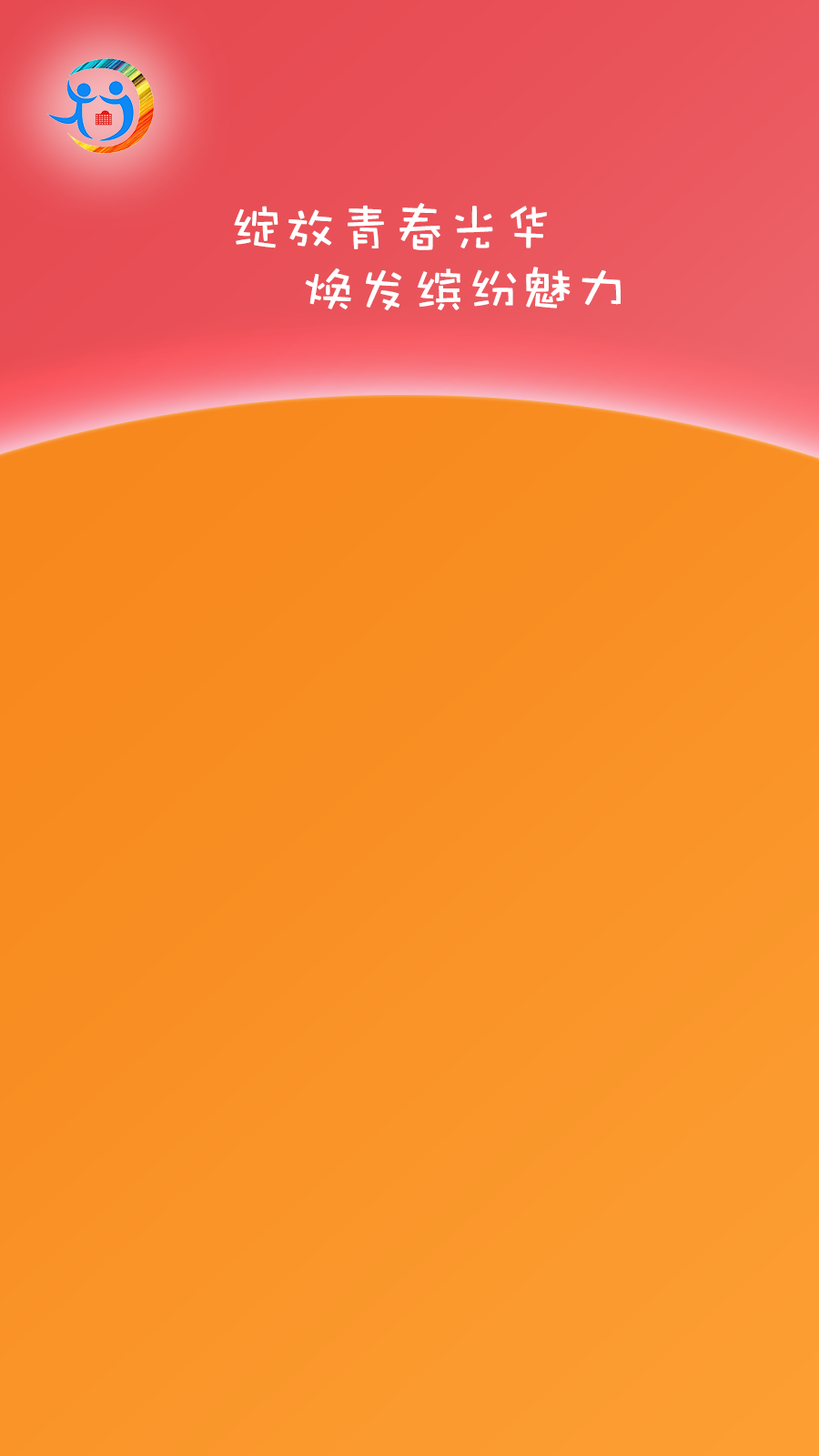
<style>
.page{position:relative;width:819px;height:1456px}
.page>*{position:absolute;margin:0}
.t1{font:54.6px "DFWaWaSC-W5";color:#ffffff}
</style>
<div class="page">
<p class="t1" style="left:234px;top:203px;width:313px;height:47px">绽放青春光华</p>
<p class="t1" style="left:305px;top:267px;width:316px;height:43px">焕发缤纷魅力</p>
</div>
